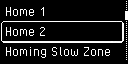
<style>
.page{position:relative;width:128px;height:64px;background:#000000}
.page>*{position:absolute;margin:0}
.t1{font:16px "PixelOperator";color:#ffffff}
</style>
<div class="page">
<p class="t1" style="left:5px;top:7px;width:39px;height:9px">Home 1</p>
<p class="t1" style="left:5px;top:27px;width:40px;height:9px">Home 2</p>
<p class="t1" style="left:6px;top:47px;width:105px;height:11px">Homing Slow Zone</p>
</div>
